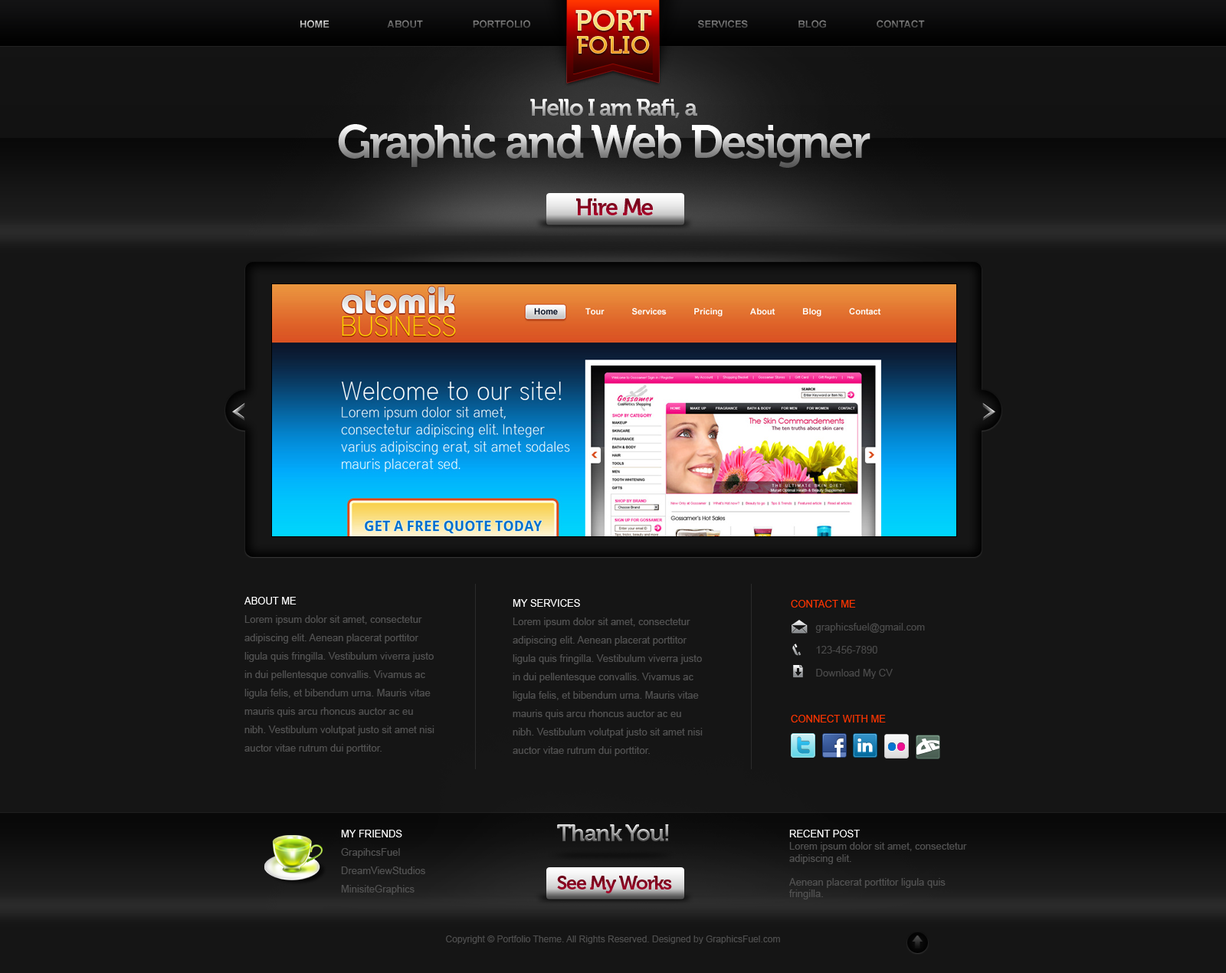
<style>
.page{position:relative;width:1226px;height:973px;background:#151515}
.page>*{position:absolute;margin:0}
.t1{font:24.5px/23px "Museo700-Regular";text-transform:uppercase}
.t2{font:29.1px/23px "Museo700-Regular";text-transform:uppercase}
.t3{font:10px "Arial-BoldMT";text-transform:uppercase}
.t4{font:23px "Museo700-Regular";letter-spacing:-0.05em}
.t5{font:46px "Museo700-Regular";letter-spacing:-0.05em}
.t6{font:10px/18.4px "ArialMT";color:#515151}
.t7{font:10px/18.4px "ArialMT";color:#ffffff;text-transform:uppercase}
.t8{font:10px/23px "ArialMT";color:#494949}
.t9{font:10px/23px "ArialMT";color:#fd3400;text-transform:uppercase}
.t10{font:10px "ArialMT";color:#515151}
.t11{font:19.2px "Museo700-Regular";letter-spacing:-0.05em;color:#860120}
.t12{font:9.2px "ArialMT";color:#4d4d4d}
</style>
<div class="page">
<p class="t1" style="left:575px;top:10px;width:77px;height:44px;text-align:center"><span class="t2">Port<br></span>folio</p>
<p class="t3" style="left:300px;top:20px;width:29px;height:8px">home</p>
<p class="t3" style="left:387px;top:20px;width:143px;height:8px">about                  portfolio</p>
<p class="t3" style="left:698px;top:20px;width:227px;height:8px">services                  blog                  contact</p>
<p class="t4" style="left:530px;top:99px;width:167px;height:19px">Hello I am Rafi, a</p>
<p class="t5" style="left:338px;top:124px;width:532px;height:44px">Graphic and Web Designer</p>
<p class="t4" style="left:576px;top:198px;width:77px;height:17px">Hire Me</p>
<p class="t6" style="left:244px;top:597px;width:190px;height:157px"><span class="t7">about me<br></span>Lorem ipsum dolor sit amet, consectetur adipiscing elit. Aenean placerat porttitor ligula quis fringilla. Vestibulum viverra justo in dui pellentesque convallis. Vivamus ac ligula felis, et bibendum urna. Mauris vitae mauris quis arcu rhoncus auctor ac eu nibh. Vestibulum volutpat justo sit amet nisi auctor vitae rutrum dui porttitor.</p>
<p class="t6" style="left:512px;top:599px;width:190px;height:157px"><span class="t7">my Services<br></span>Lorem ipsum dolor sit amet, consectetur adipiscing elit. Aenean placerat porttitor ligula quis fringilla. Vestibulum viverra justo in dui pellentesque convallis. Vivamus ac ligula felis, et bibendum urna. Mauris vitae mauris quis arcu rhoncus auctor ac eu nibh. Vestibulum volutpat justo sit amet nisi auctor vitae rutrum dui porttitor.</p>
<p class="t8" style="left:791px;top:600px;width:134px;height:122px"><span class="t9">Contact Me<br></span>         graphicsfuel@gmail.com<br>         123-456-7890<br>         Download My CV<br><br><span class="t9">connect with me</span></p>
<p class="t6" style="left:341px;top:830px;width:84px;height:65px"><span class="t7">My Friends<br></span>GrapihcsFuel<br>DreamViewStudios<br>MinisiteGraphics</p>
<p class="t4" style="left:557px;top:824px;width:112px;height:17px">Thank You!</p>
<p class="t10" style="left:789px;top:830px;width:178px;height:69px"><span class="t7">Recent Post<br></span>Lorem ipsum dolor sit amet, consectetur adipiscing elit. <br><br>Aenean placerat porttitor ligula quis fringilla.</p>
<p class="t11" style="left:557px;top:876px;width:115px;height:17px">See My Works</p>
<p class="t12" style="left:446px;top:935px;width:334px;height:9px">Copyright © Portfolio Theme. All Rights Reserved. Designed by GraphicsFuel.com</p>
</div>
